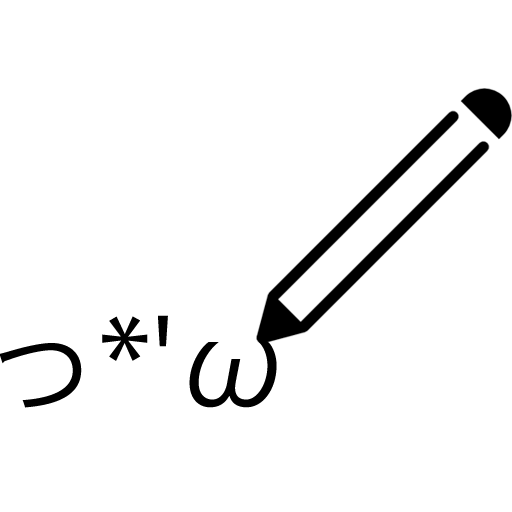
<style>
.page{position:relative;width:512px;height:512px;background:#ffffff}
.page>*{position:absolute;margin:0}
.t1{font:115.2px "KozGoPr6N-Regular";color:#000000}
</style>
<div class="page">
<p class="t1" style="left:0px;top:315px;width:277px;height:93px">っ*'ω</p>
</div>
